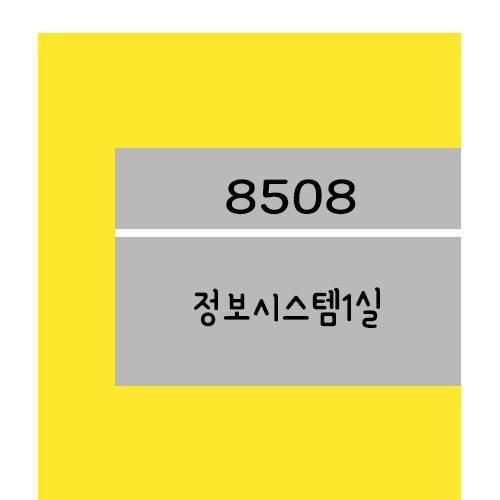
<style>
.page{position:relative;width:500px;height:500px;background:#fee82d}
.page>*{position:absolute;margin:0}
.t1{font:61.2px "YanoljaYacheR";color:#000000;scale:1.18 1}
.t2{font:48px "YanoljaYacheR";color:#000000}
</style>
<div class="page">
<p class="t1" style="left:226px;top:179px;width:130px;height:36px">8508</p>
<p class="t2" style="left:194px;top:287px;width:186px;height:41px">정보시스템1실</p>
</div>
